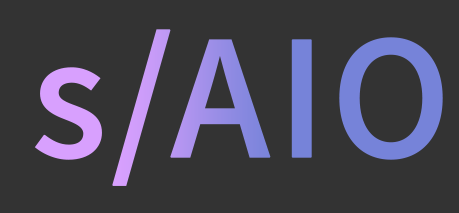
<style>
.page{position:relative;width:459px;height:213px;background:#333333}
.page>*{position:absolute;margin:0}
.t1{font:158.7px "SourceHanSansSC-Medium";letter-spacing:0.025em;font-weight:bold}
</style>
<div class="page">
<p class="t1" style="left:34px;top:29px;width:409px;height:157px">s/AIO</p>
</div>
